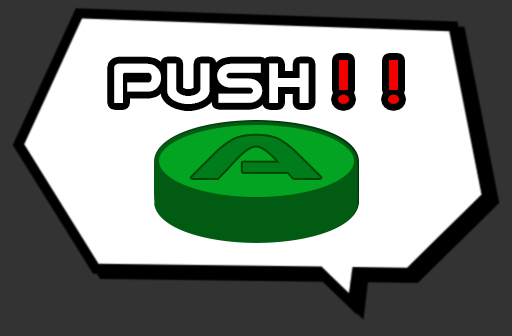
<style>
.page{position:relative;width:512px;height:336px;background:#ffffff}
.page>*{position:absolute;margin:0}
.t1{font:67.8px "Nicoca";color:#ffffff}
.t2{font:67.8px "Nicoca";color:#f20000}
.t3{font:70.1px "Nicoca";color:#017c1a;scale:2.58 1}
</style>
<div class="page">
<p class="t1" style="left:114px;top:60px;width:285px;height:44px">PUSH <span class="t2">! !</span></p>
<p class="t3" style="left:191px;top:135px;width:130px;height:43px">A</p>
</div>
